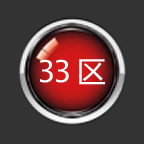
<style>
.page{position:relative;width:144px;height:144px;background:#333333}
.page>*{position:absolute;margin:0}
.t1{font:30px "LucidaSansUnicode";letter-spacing:-0.1em;color:#ffffff}
.t2{font:30px "MicrosoftYaHei";letter-spacing:-0.1em;color:#ffffff}
</style>
<div class="page">
<p class="t1" style="left:40px;top:59px;width:65px;height:26px">33<span class="t2">区</span></p>
</div>
